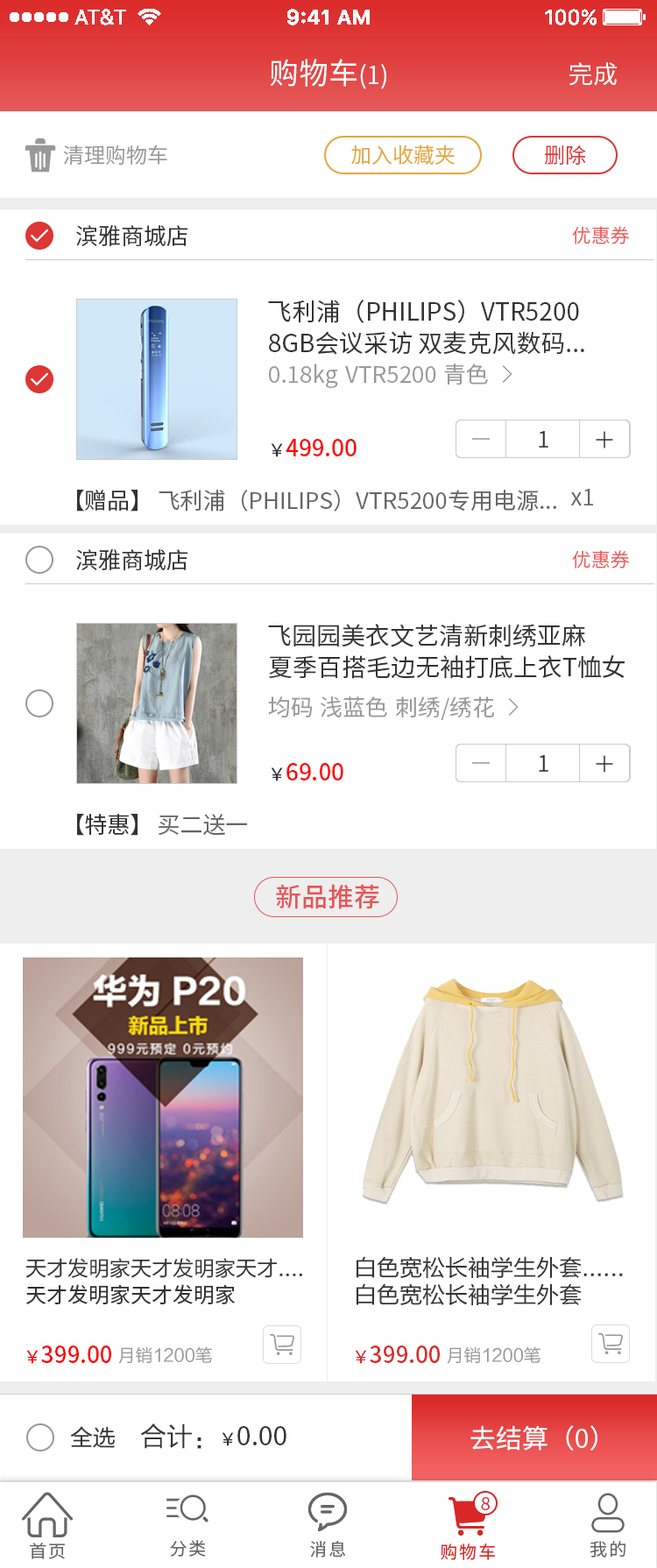
<style>
.page{position:relative;width:657px;height:1568px;background:#ffffff}
.page>*{position:absolute;margin:0}
.t1{font:29.8px "SourceHanSansCN-Regular";color:#ffffff}
.t2{font:24.5px "SourceHanSansCN-Regular";color:#ffffff}
.t3{font:21px "SourceHanSansCN-Normal";color:#999999}
.t4{font:21px "SourceHanSansCN-Normal";color:#e4a73e}
.t5{font:21px "SourceHanSansCN-Normal";color:#de3535}
.t6{font:22.8px "SourceHanSansCN-Normal";color:#333333}
.t7{font:19.3px "SourceHanSansCN-Normal";color:#f05c5c}
.t8{font:24.5px "SourceHanSansCN-Regular";color:#333333}
.t9{font:22.8px "SourceHanSansCN-Regular";color:#999999}
.t10{font:22.8px "SourceHanSansCN-Medium";color:#ff0000}
.t11{font:17.5px "SourceHanSansCN-Regular";color:#333333}
.t12{font:22.8px "SourceHanSansCN-Regular";color:#333333}
.t13{font:22.8px "SourceHanSansCN-Regular";color:#666666}
.t14{font:26.3px "SourceHanSansCN-Medium";color:#e65656}
.t15{font:21px "FZLTHK--GBK1-0";color:#333333}
.t16{font:22.8px "FZLTHK--GBK1-0";color:#333333}
.t17{font:21px "SourceHanSansCN-Regular";color:#333333}
.t18{font:17.5px "SourceHanSansCN-Regular";color:#ff0000}
.t19{font:17.5px "FZLTHK--GBK1-0";color:#999999}
.t20{font:22.8px "SourceHanSansCN-Medium";color:#df2727}
.t21{font:17.5px "SourceHanSansCN-Regular";color:#df2727}
.t22{font:26.3px "SourceHanSansCN-Regular";color:#333333}
.t23{font:26.3px "FZLTHK--GBK1-0";color:#333333}
.t24{font:26.3px "SourceHanSansCN-Regular";color:#ffffff}
.t25{font:17.5px "SourceHanSansCN-Normal";color:#da2626}
.t26{font:17.5px "SourceHanSansCN-Regular";letter-spacing:0.1em;color:#666666}
.t27{font:17.5px "SourceHanSansCN-Regular";letter-spacing:0.1em;color:#da2626}
</style>
<div class="page">
<p class="t1" style="left:270px;top:59px;width:116px;height:30px">购物车<span class="t2">(1)</span></p>
<p class="t2" style="left:569px;top:62px;width:48px;height:24px">完成</p>
<p class="t3" style="left:63px;top:145px;width:104px;height:21px">清理购物车</p>
<p class="t4" style="left:351px;top:145px;width:104px;height:20px">加入收藏夹</p>
<p class="t5" style="left:545px;top:145px;width:41px;height:20px">删除</p>
<p class="t6" style="left:76px;top:224px;width:112px;height:23px">滨雅商城店</p>
<p class="t7" style="left:572px;top:226px;width:58px;height:18px">优惠券</p>
<p class="t8" style="left:268px;top:300px;width:311px;height:23px">飞利浦（PHILIPS）VTR5200</p>
<p class="t8" style="left:269px;top:331px;width:315px;height:24px">8GB会议采访 双麦克风数码...</p>
<p class="t9" style="left:269px;top:364px;width:69px;height:24px">0.18kg</p>
<p class="t9" style="left:444px;top:364px;width:44px;height:21px">青色</p>
<p class="t9" style="left:345px;top:366px;width:91px;height:17px">VTR5200</p>
<p class="t6" style="left:539px;top:431px;width:9px;height:17px">1</p>
<p class="t10" style="left:271px;top:439px;width:86px;height:18px"><span class="t11">￥</span>499.00</p>
<p class="t12" style="left:77px;top:490px;width:61px;height:22px">【赠品】</p>
<p class="t13" style="left:159px;top:490px;width:397px;height:22px">飞利浦（PHILIPS）VTR5200专用电源...</p>
<p class="t13" style="left:570px;top:489px;width:23px;height:16px">x1</p>
<p class="t6" style="left:76px;top:548px;width:112px;height:23px">滨雅商城店</p>
<p class="t7" style="left:572px;top:550px;width:58px;height:19px">优惠券</p>
<p class="t8" style="left:268px;top:624px;width:317px;height:23px">飞园园美衣文艺清新刺绣亚麻</p>
<p class="t8" style="left:269px;top:655px;width:356px;height:24px">夏季百搭毛边无袖打底上衣T恤女</p>
<p class="t9" style="left:268px;top:696px;width:45px;height:21px">均码</p>
<p class="t9" style="left:321px;top:696px;width:66px;height:21px">浅蓝色</p>
<p class="t9" style="left:396px;top:696px;width:98px;height:24px">刺绣/绣花</p>
<p class="t6" style="left:539px;top:755px;width:9px;height:17px">1</p>
<p class="t10" style="left:271px;top:763px;width:72px;height:18px"><span class="t11">￥</span>69.00</p>
<p class="t12" style="left:77px;top:814px;width:61px;height:22px">【特惠】</p>
<p class="t13" style="left:159px;top:814px;width:88px;height:22px">买二送一</p>
<p class="t14" style="left:276px;top:884px;width:103px;height:25px">新品推荐</p>
<p class="t15" style="left:25px;top:1258px;width:277px;height:20px">天才发明家天才发明家天才....</p>
<p class="t16" style="left:356px;top:1256px;width:267px;height:23px">白色宽松长袖学生外套......</p>
<p class="t17" style="left:26px;top:1284px;width:209px;height:20px">天才发明家天才发明家</p>
<p class="t16" style="left:356px;top:1283px;width:226px;height:23px">白色宽松长袖学生外套</p>
<p class="t10" style="left:26px;top:1346px;width:85px;height:18px"><span class="t18">¥</span>399.00</p>
<p class="t19" style="left:118px;top:1346px;width:94px;height:18px">月销1200笔</p>
<p class="t20" style="left:355px;top:1346px;width:85px;height:18px"><span class="t21">¥</span>399.00</p>
<p class="t19" style="left:447px;top:1346px;width:93px;height:18px">月销1200笔</p>
<p class="t16" style="left:70px;top:1426px;width:46px;height:22px">全选</p>
<p class="t22" style="left:141px;top:1423px;width:145px;height:26px"><span class="t23">合计：</span><span class="t11">¥</span>0.00</p>
<p class="t24" style="left:470px;top:1425px;width:127px;height:26px">去结算（0）</p>
<p class="t25" style="left:481px;top:1497px;width:9px;height:13px">8</p>
<p class="t26" style="left:170px;top:1540px;width:36px;height:17px">分类</p>
<p class="t26" style="left:310px;top:1541px;width:35px;height:16px">消息</p>
<p class="t26" style="left:590px;top:1541px;width:35px;height:16px">我的</p>
<p class="t26" style="left:30px;top:1543px;width:35px;height:16px">首页</p>
<p class="t27" style="left:441px;top:1543px;width:55px;height:17px">购物车</p>
</div>
